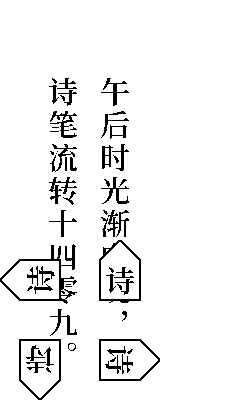
<style>
.page{position:relative;width:240px;height:400px;background:#ffffff}
.page>*{position:absolute;margin:0}
.t1{font:30px "SourceHanSerifSCVF-SemiBold";letter-spacing:0.1em;color:#000000}
.t2{font:30px "SourceHanSerifCNVF-SemiBold";letter-spacing:0.1em;color:#000000}
</style>
<div class="page">
<p class="t1" style="left:49px;top:78px;width:80px;height:273px">午后时光渐向晚，<br>诗笔流转十四零九。</p>
<p class="t2" style="left:27px;top:266px;width:28px;height:28px;rotate:-90deg">诗</p>
<p class="t2" style="left:106px;top:267px;width:28px;height:28px">诗</p>
<p class="t2" style="left:26px;top:345px;width:28px;height:28px;rotate:180deg">诗</p>
<p class="t2" style="left:105px;top:346px;width:28px;height:28px;rotate:90deg">诗</p>
</div>
